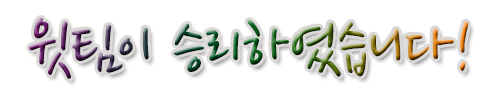
<style>
.page{position:relative;width:500px;height:100px;background:#ffffff}
.page>*{position:absolute;margin:0}
.t1{font:72px "NanumPen"}
</style>
<div class="page">
<p class="t1" style="left:29px;top:17px;width:440px;height:62px">윗팀이 승리하였습니다!</p>
</div>
